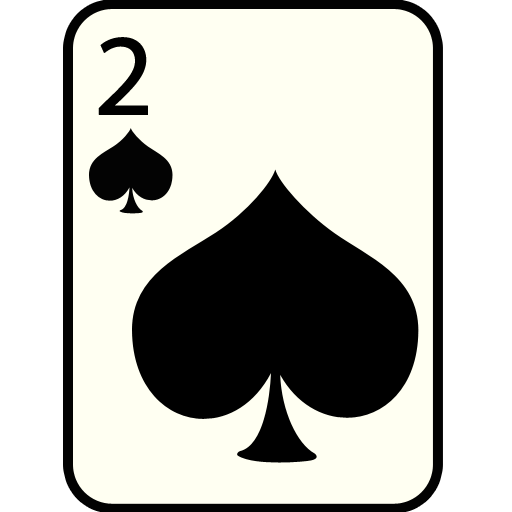
<style>
.page{position:relative;width:512px;height:512px;background:#fffff2}
.page>*{position:absolute;margin:0}
.t1{font:200px "MyriadPro-Regular";letter-spacing:-0.05em;color:#000000;font-variant:small-caps;font-weight:bold}
</style>
<div class="page">
<p class="t1" style="left:98px;top:37px;width:50px;height:78px">2</p>
</div>
